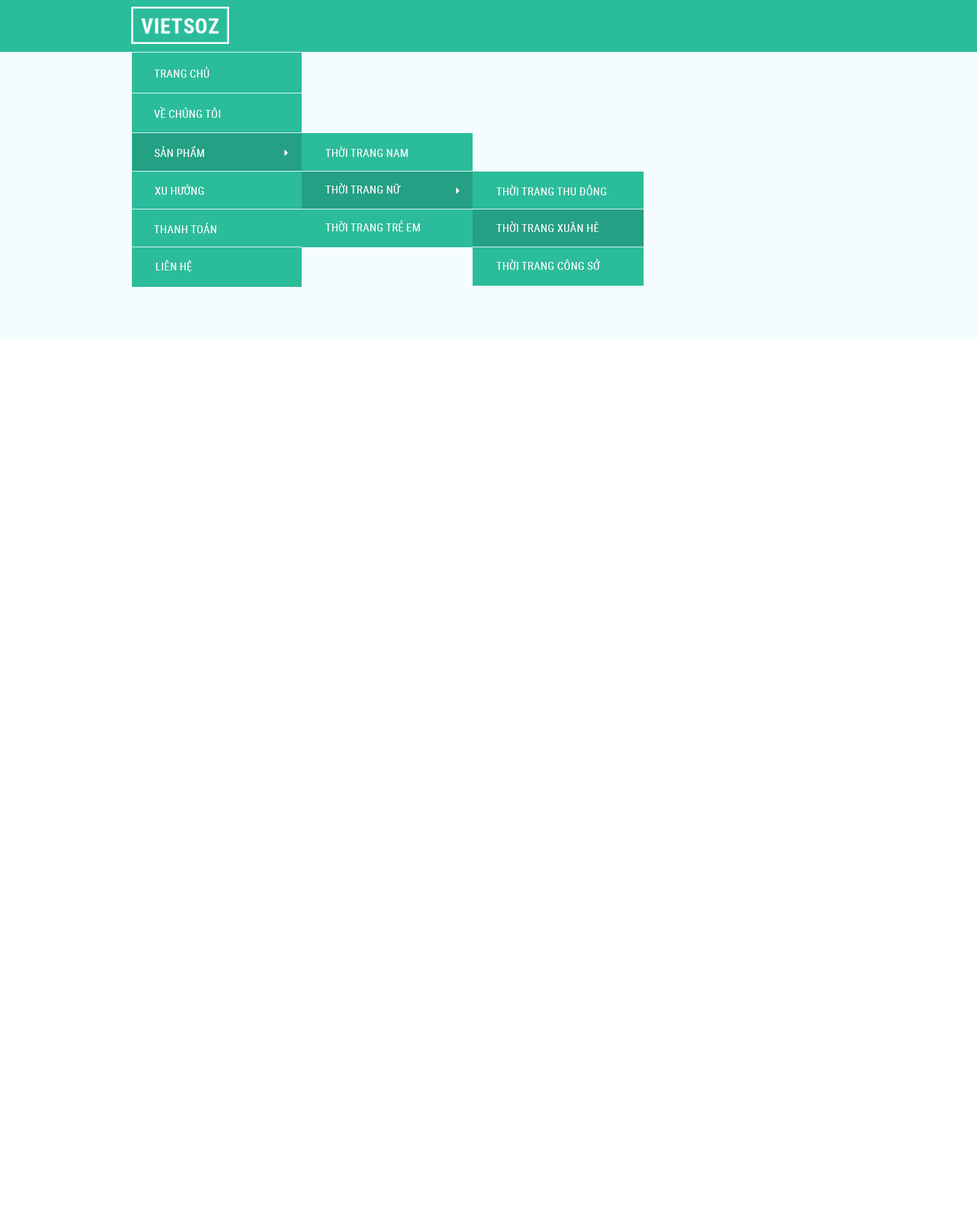
<style>
.page{position:relative;width:977px;height:1221px;background:#ffffff}
.page>*{position:absolute;margin:0}
.t1{font:11px "RobotoCondensed-Regular";color:#ffffff;text-transform:uppercase}
</style>
<div class="page">
<p class="t1" style="left:154px;top:67px;width:55px;height:11px">TRANG CHỦ</p>
<p class="t1" style="left:154px;top:107px;width:66px;height:11px">vỀ CHÚNG TÔI</p>
<p class="t1" style="left:154px;top:146px;width:50px;height:11px">SẢN PHẨM</p>
<p class="t1" style="left:325px;top:147px;width:83px;height:10px">Thời Trang Nam</p>
<p class="t1" style="left:155px;top:184px;width:49px;height:11px">XU HƯỚNG</p>
<p class="t1" style="left:325px;top:183px;width:75px;height:11px">Thời Trang Nữ</p>
<p class="t1" style="left:496px;top:185px;width:110px;height:10px">Thời Trang Thu Đông</p>
<p class="t1" style="left:325px;top:220px;width:95px;height:11px">Thời Trang Trẻ em</p>
<p class="t1" style="left:496px;top:222px;width:103px;height:10px">Thời Trang Xuân Hè</p>
<p class="t1" style="left:154px;top:223px;width:63px;height:10px">THANH TOÁN</p>
<p class="t1" style="left:156px;top:260px;width:36px;height:12px">Liên hệ</p>
<p class="t1" style="left:496px;top:259px;width:104px;height:11px">Thời Trang Công Sở</p>
</div>
